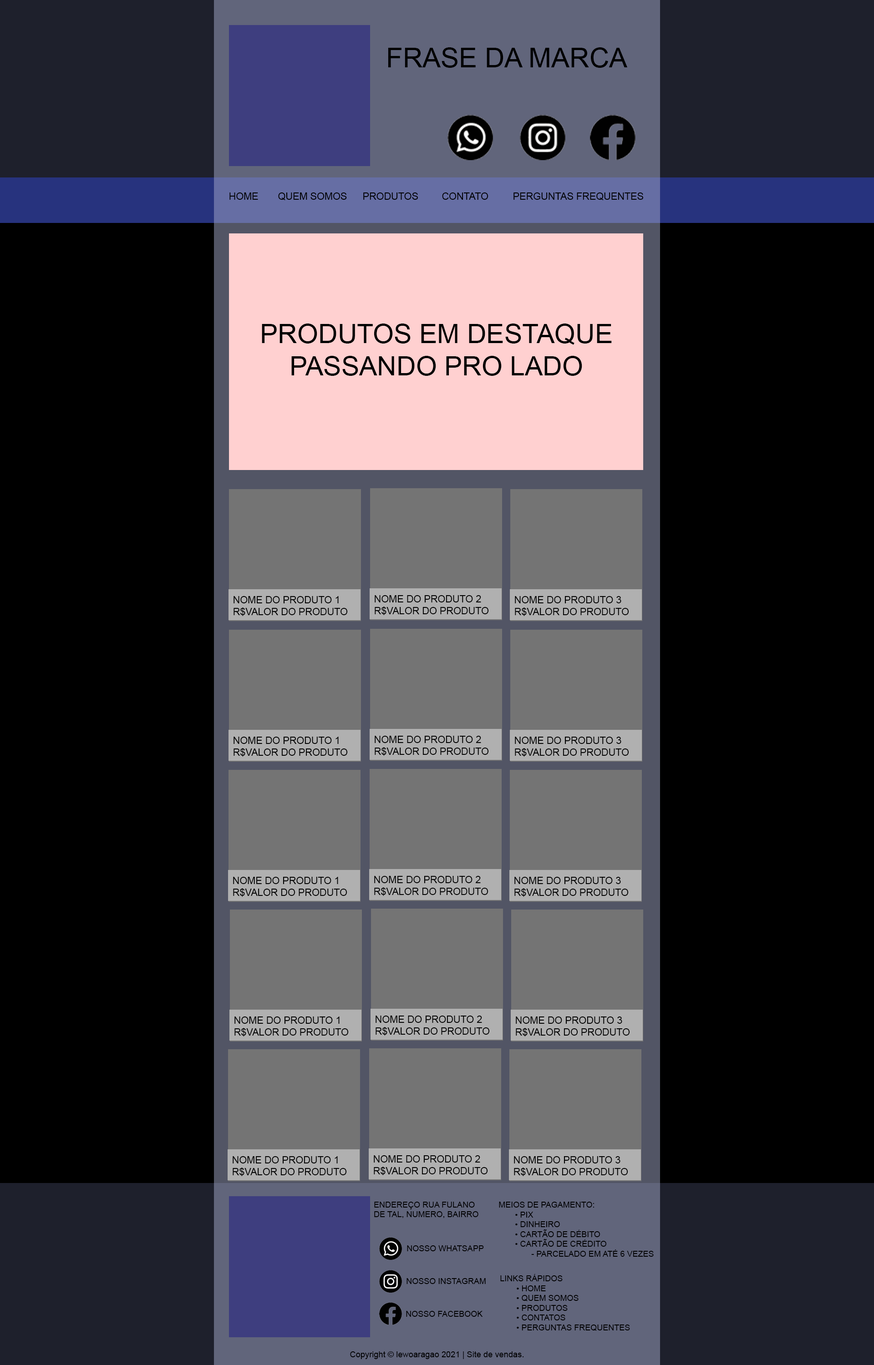
<style>
.page{position:relative;width:874px;height:1365px;background:#000000}
.page>*{position:absolute;margin:0}
.t1{font:27.3px "ArialMT";color:#000000}
.t2{font:10px "ArialMT";color:#000000}
.t3{font:26.9px "ArialMT";color:#000000}
.t4{font:9.9px "ArialMT";color:#000000}
.t5{font:8.2px "ArialMT";color:#000000}
.t6{font:8.1px "ArialMT";color:#000000}
</style>
<div class="page">
<p class="t1" style="left:388px;top:47px;width:239px;height:21px">FRASE DA MARCA</p>
<p class="t2" style="left:229px;top:192px;width:414px;height:8px">HOME  QUEM SOMOS  PRODUTOS   CONTATO         PERGUNTAS FREQUENTES</p>
<p class="t3" style="left:262px;top:324px;width:350px;height:52px;text-align:center">PRODUTOS EM DESTAQUE<br>PASSANDO PRO LADO</p>
<p class="t4" style="left:233px;top:596px;width:115px;height:20px">NOME DO PRODUTO 1<br>R$VALOR DO PRODUTO</p>
<p class="t4" style="left:374px;top:595px;width:115px;height:20px">NOME DO PRODUTO 2<br>R$VALOR DO PRODUTO</p>
<p class="t4" style="left:515px;top:596px;width:114px;height:20px">NOME DO PRODUTO 3<br>R$VALOR DO PRODUTO</p>
<p class="t4" style="left:233px;top:737px;width:115px;height:20px">NOME DO PRODUTO 1<br>R$VALOR DO PRODUTO</p>
<p class="t4" style="left:374px;top:736px;width:115px;height:20px">NOME DO PRODUTO 2<br>R$VALOR DO PRODUTO</p>
<p class="t4" style="left:515px;top:737px;width:114px;height:20px">NOME DO PRODUTO 3<br>R$VALOR DO PRODUTO</p>
<p class="t4" style="left:233px;top:877px;width:114px;height:20px">NOME DO PRODUTO 1<br>R$VALOR DO PRODUTO</p>
<p class="t4" style="left:374px;top:876px;width:114px;height:20px">NOME DO PRODUTO 2<br>R$VALOR DO PRODUTO</p>
<p class="t4" style="left:514px;top:877px;width:114px;height:20px">NOME DO PRODUTO 3<br>R$VALOR DO PRODUTO</p>
<p class="t4" style="left:234px;top:1016px;width:115px;height:20px">NOME DO PRODUTO 1<br>R$VALOR DO PRODUTO</p>
<p class="t4" style="left:375px;top:1016px;width:115px;height:20px">NOME DO PRODUTO 2<br>R$VALOR DO PRODUTO</p>
<p class="t4" style="left:516px;top:1016px;width:114px;height:20px">NOME DO PRODUTO 3<br>R$VALOR DO PRODUTO</p>
<p class="t4" style="left:233px;top:1156px;width:114px;height:20px">NOME DO PRODUTO 1<br>R$VALOR DO PRODUTO</p>
<p class="t4" style="left:374px;top:1155px;width:114px;height:20px">NOME DO PRODUTO 2<br>R$VALOR DO PRODUTO</p>
<p class="t4" style="left:514px;top:1156px;width:114px;height:20px">NOME DO PRODUTO 3<br>R$VALOR DO PRODUTO</p>
<p class="t5" style="left:374px;top:1202px;width:104px;height:16px">ENDEREÇO RUA FULANO<br>DE TAL, NUMERO, BAIRRO</p>
<p class="t5" style="left:499px;top:1202px;width:154px;height:55px">MEIOS DE PAGAMENTO:<br> • PIX<br> • DINHEIRO<br> • CARTÃO DE DÉBITO<br> • CARTÃO DE CRÉDITO<br>  - PARCELADO EM ATÉ 6 VEZES</p>
<p class="t5" style="left:407px;top:1245px;width:77px;height:6px">NOSSO WHATSAPP</p>
<p class="t5" style="left:500px;top:1274px;width:130px;height:57px">LINKS RÁPIDOS<br> • HOME<br> • QUEM SOMOS<br> • PRODUTOS<br> • CONTATOS<br> • PERGUNTAS FREQUENTES</p>
<p class="t5" style="left:406px;top:1278px;width:79px;height:6px">NOSSO INSTAGRAM</p>
<p class="t5" style="left:406px;top:1311px;width:77px;height:6px">NOSSO FACEBOOK</p>
<p class="t6" style="left:350px;top:1351px;width:174px;height:8px">Copyright © lewoaragao 2021 | Site de vendas.</p>
</div>
